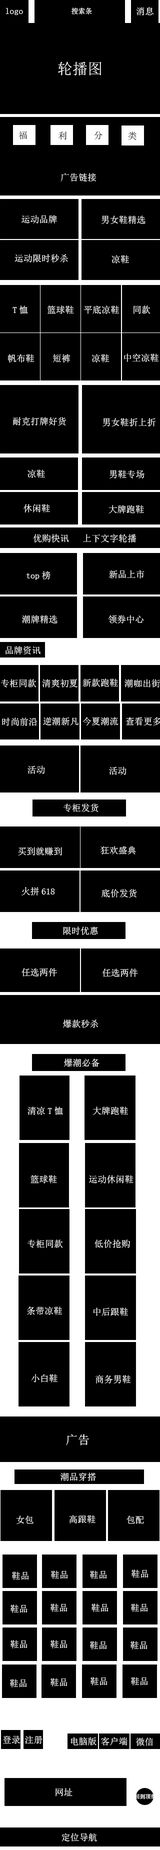
<style>
.page{position:relative;width:160px;height:1850px;background:#000000}
.page>*{position:absolute;margin:0}
.t1{font:9px "SimSun";color:#ffffff}
.t2{font:7px "SimSun";color:#ffffff}
.t3{font:15px "SimSun";color:#ffffff}
.t4{font:9px "SimSun";color:#000000}
.t5{font:12px "SimSun";color:#ffffff}
.t6{font:5.5px "SimSun";color:#ffffff}
</style>
<div class="page">
<p class="t1" style="left:6px;top:8px;width:17px;height:7px">logo</p>
<p class="t2" style="left:72px;top:8px;width:20px;height:6px">搜索条</p>
<p class="t1" style="left:136px;top:7px;width:18px;height:9px">消息</p>
<p class="t3" style="left:58px;top:62px;width:44px;height:14px">轮播图</p>
<p class="t4" style="left:18px;top:131px;width:9px;height:9px">福</p>
<p class="t4" style="left:58px;top:132px;width:8px;height:8px">利</p>
<p class="t4" style="left:94px;top:131px;width:8px;height:9px">分</p>
<p class="t4" style="left:128px;top:132px;width:8px;height:8px">类</p>
<p class="t1" style="left:60px;top:173px;width:36px;height:9px">广告链接</p>
<p class="t1" style="left:22px;top:215px;width:35px;height:9px">运动品牌</p>
<p class="t1" style="left:102px;top:216px;width:44px;height:8px">男女鞋精选</p>
<p class="t1" style="left:14px;top:254px;width:54px;height:8px">运动限时秒杀</p>
<p class="t1" style="left:112px;top:255px;width:17px;height:9px">凉鞋</p>
<p class="t1" style="left:12px;top:306px;width:16px;height:8px">T恤</p>
<p class="t1" style="left:48px;top:306px;width:26px;height:8px">篮球鞋</p>
<p class="t1" style="left:84px;top:306px;width:36px;height:8px">平底凉鞋</p>
<p class="t1" style="left:134px;top:306px;width:16px;height:8px">同款</p>
<p class="t1" style="left:124px;top:354px;width:35px;height:8px">中空凉鞋</p>
<p class="t1" style="left:8px;top:354px;width:26px;height:8px">帆布鞋</p>
<p class="t1" style="left:53px;top:354px;width:17px;height:8px">短裤</p>
<p class="t1" style="left:92px;top:354px;width:18px;height:8px">凉鞋</p>
<p class="t1" style="left:13px;top:417px;width:53px;height:9px">耐克打牌好货</p>
<p class="t1" style="left:102px;top:418px;width:54px;height:8px">男女鞋折上折</p>
<p class="t1" style="left:28px;top:470px;width:17px;height:8px">凉鞋</p>
<p class="t1" style="left:110px;top:470px;width:34px;height:8px">男鞋专场</p>
<p class="t1" style="left:24px;top:504px;width:26px;height:8px">休闲鞋</p>
<p class="t1" style="left:108px;top:505px;width:36px;height:9px">大牌跑鞋</p>
<p class="t1" style="left:33px;top:534px;width:103px;height:8px">优购快讯   上下文字轮播</p>
<p class="t1" style="left:26px;top:571px;width:24px;height:9px">top榜</p>
<p class="t1" style="left:109px;top:570px;width:35px;height:8px">新品上市</p>
<p class="t1" style="left:22px;top:615px;width:36px;height:9px">潮牌精选</p>
<p class="t1" style="left:108px;top:615px;width:36px;height:9px">领券中心</p>
<p class="t1" style="left:6px;top:646px;width:34px;height:8px">品牌资讯</p>
<p class="t1" style="left:1px;top:679px;width:35px;height:9px">专柜同款</p>
<p class="t1" style="left:42px;top:679px;width:36px;height:9px">清爽初夏</p>
<p class="t1" style="left:82px;top:678px;width:36px;height:9px">新款跑鞋</p>
<p class="t1" style="left:124px;top:679px;width:36px;height:9px">潮咖出街</p>
<p class="t1" style="left:2px;top:718px;width:36px;height:8px">时尚前沿</p>
<p class="t1" style="left:43px;top:717px;width:36px;height:9px">逆潮新凡</p>
<p class="t1" style="left:82px;top:717px;width:36px;height:9px">今夏潮流</p>
<p class="t1" style="left:126px;top:717px;width:34px;height:9px">查看更多</p>
<p class="t1" style="left:28px;top:766px;width:17px;height:8px">活动</p>
<p class="t1" style="left:109px;top:766px;width:17px;height:9px">活动</p>
<p class="t1" style="left:64px;top:804px;width:34px;height:8px">专柜发货</p>
<p class="t1" style="left:100px;top:846px;width:36px;height:8px">狂欢盛典</p>
<p class="t1" style="left:18px;top:847px;width:44px;height:9px">买到就赚到</p>
<p class="t1" style="left:22px;top:887px;width:33px;height:9px">火拼618</p>
<p class="t1" style="left:102px;top:889px;width:35px;height:9px">底价发货</p>
<p class="t1" style="left:63px;top:926px;width:35px;height:9px">限时优惠</p>
<p class="t1" style="left:22px;top:968px;width:35px;height:8px">任选两件</p>
<p class="t1" style="left:102px;top:968px;width:36px;height:9px">任选两件</p>
<p class="t1" style="left:63px;top:1020px;width:35px;height:8px">爆款秒杀</p>
<p class="t1" style="left:64px;top:1058px;width:36px;height:9px">爆潮必备</p>
<p class="t1" style="left:28px;top:1106px;width:35px;height:9px">清凉T恤</p>
<p class="t1" style="left:92px;top:1106px;width:36px;height:9px">大牌跑鞋</p>
<p class="t1" style="left:30px;top:1175px;width:27px;height:9px">篮球鞋</p>
<p class="t1" style="left:89px;top:1175px;width:45px;height:9px">运动休闲鞋</p>
<p class="t1" style="left:28px;top:1240px;width:35px;height:8px">专柜同款</p>
<p class="t1" style="left:94px;top:1240px;width:36px;height:8px">低价抢购</p>
<p class="t1" style="left:27px;top:1306px;width:35px;height:9px">条带凉鞋</p>
<p class="t1" style="left:94px;top:1308px;width:34px;height:8px">中后跟鞋</p>
<p class="t1" style="left:31px;top:1374px;width:27px;height:8px">小白鞋</p>
<p class="t1" style="left:96px;top:1375px;width:35px;height:9px">商务男鞋</p>
<p class="t5" style="left:66px;top:1434px;width:23px;height:12px">广告</p>
<p class="t1" style="left:60px;top:1472px;width:36px;height:9px">潮品穿搭</p>
<p class="t1" style="left:16px;top:1516px;width:18px;height:8px">女包</p>
<p class="t1" style="left:69px;top:1515px;width:27px;height:9px">高跟鞋</p>
<p class="t1" style="left:126px;top:1516px;width:18px;height:8px">包配</p>
<p class="t1" style="left:12px;top:1572px;width:17px;height:8px">鞋品</p>
<p class="t1" style="left:51px;top:1570px;width:17px;height:9px">鞋品</p>
<p class="t1" style="left:90px;top:1570px;width:17px;height:9px">鞋品</p>
<p class="t1" style="left:132px;top:1570px;width:16px;height:8px">鞋品</p>
<p class="t1" style="left:10px;top:1604px;width:18px;height:9px">鞋品</p>
<p class="t1" style="left:50px;top:1604px;width:18px;height:8px">鞋品</p>
<p class="t1" style="left:92px;top:1604px;width:16px;height:8px">鞋品</p>
<p class="t1" style="left:131px;top:1604px;width:17px;height:8px">鞋品</p>
<p class="t1" style="left:10px;top:1640px;width:18px;height:8px">鞋品</p>
<p class="t1" style="left:50px;top:1640px;width:18px;height:8px">鞋品</p>
<p class="t1" style="left:90px;top:1641px;width:17px;height:9px">鞋品</p>
<p class="t1" style="left:130px;top:1641px;width:18px;height:9px">鞋品</p>
<p class="t1" style="left:10px;top:1679px;width:17px;height:9px">鞋品</p>
<p class="t1" style="left:50px;top:1678px;width:18px;height:8px">鞋品</p>
<p class="t1" style="left:90px;top:1677px;width:18px;height:9px">鞋品</p>
<p class="t1" style="left:131px;top:1677px;width:17px;height:9px">鞋品</p>
<p class="t1" style="left:3px;top:1736px;width:17px;height:8px">登录</p>
<p class="t1" style="left:25px;top:1736px;width:17px;height:8px">注册</p>
<p class="t1" style="left:71px;top:1737px;width:25px;height:9px">电脑版</p>
<p class="t1" style="left:101px;top:1737px;width:27px;height:9px">客户端</p>
<p class="t1" style="left:136px;top:1738px;width:17px;height:8px">微信</p>
<p class="t1" style="left:56px;top:1788px;width:16px;height:8px">网址</p>
<p class="t6" style="left:134px;top:1794px;width:22px;height:6px">回到顶部</p>
<p class="t1" style="left:62px;top:1833px;width:35px;height:9px">定位导航</p>
</div>
